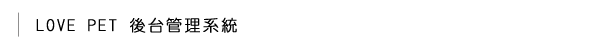
<style>
.page{position:relative;width:600px;height:50px;background:#ffffff}
.page>*{position:absolute;margin:0}
.t1{font:16px "DFYuan-Lt-HK-BF";letter-spacing:0.12em;color:#000000;font-weight:bold}
</style>
<div class="page">
<p class="t1" style="left:36px;top:17px;width:201px;height:16px">LOVE PET 後台管理系統</p>
</div>
